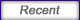
<style>
.page{position:relative;width:80px;height:20px;background:#ffffff}
.page>*{position:absolute;margin:0}
.t1{font:12px "ArialMT";color:#666666;font-weight:bold;font-style:italic}
</style>
<div class="page">
<p class="t1" style="left:20px;top:5px;width:40px;height:10px">Recent</p>
</div>
